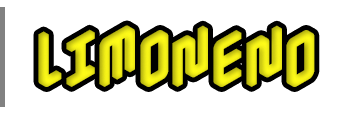
<style>
.page{position:relative;width:337px;height:113px;background:#ffffff}
.page>*{position:absolute;margin:0}
.t1{font:58.3px "Nabla-Regular";color:#e9e616}
</style>
<div class="page">
<p class="t1" style="left:38px;top:25px;width:277px;height:62px">LIMONENO</p>
</div>
